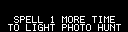
<style>
.page{position:relative;width:128px;height:32px;background:#000000}
.page>*{position:absolute;margin:0}
.t1{font:8px "Terminal";color:#ffffff}
</style>
<div class="page">
<p class="t1" style="left:14px;top:16px;width:101px;height:7px">SPELL 1 MORE TIME</p>
<p class="t1" style="left:8px;top:24px;width:113px;height:7px">TO LIGHT PHOTO HUNT</p>
</div>
